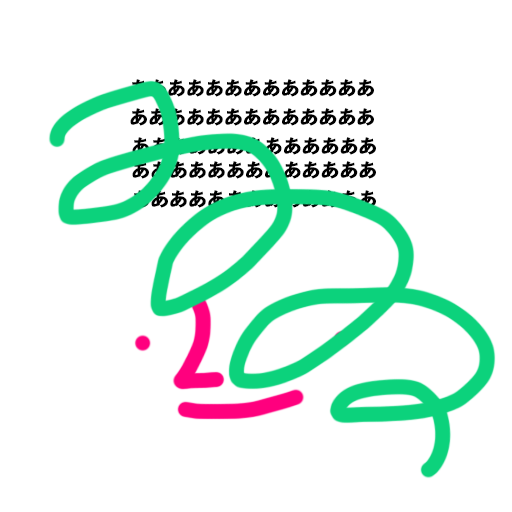
<style>
.page{position:relative;width:512px;height:512px;background:#ffffff}
.page>*{position:absolute;margin:0}
.t1{font:18.9px "GothicMB101Pro-Bold";color:#000000}
.t2{font:18.9px "GothicMB101Pro-Bold"}
</style>
<div class="page">
<p class="t1" style="left:130px;top:79px;width:244px;height:18px">あああああああああああああ</p>
<p class="t1" style="left:130px;top:108px;width:244px;height:18px">あああああああああああああ</p>
<p class="t2" style="left:132px;top:137px;width:244px;height:18px">あああああああああああああ</p>
<p class="t1" style="left:132px;top:161px;width:244px;height:18px">あああああああああああああ</p>
<p class="t2" style="left:132px;top:190px;width:244px;height:18px">あああああああああああああ</p>
</div>
